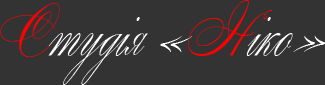
<style>
.page{position:relative;width:325px;height:85px;background:#333333}
.page>*{position:absolute;margin:0}
.t1{font:61.7px "WolfgangAmadeusMozart";color:#ffffff;scale:0.91 1}
.t2{font:61.7px "WolfgangAmadeusMozart";color:#ff0000;scale:0.91 1}
</style>
<div class="page">
<p class="t1" style="left:0px;top:0px;width:326px;height:85px"><span class="t2">С</span>тудiя «<span class="t2">Н</span>iко»</p>
</div>
